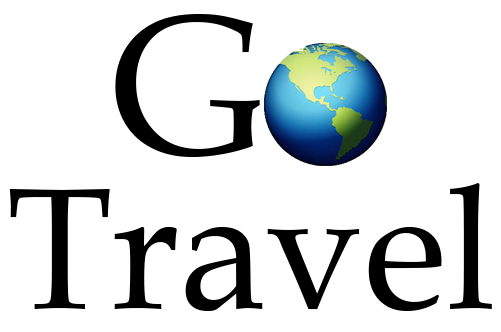
<style>
.page{position:relative;width:501px;height:332px;background:#ffffff}
.page>*{position:absolute;margin:0}
.t1{font:172px "BookAntiqua";color:#000000}
</style>
<div class="page">
<p class="t1" style="left:9px;top:183px;width:483px;height:128px">Travel</p>
</div>
